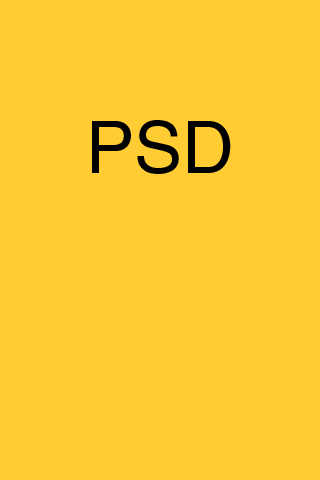
<style>
.page{position:relative;width:320px;height:480px;background:#ffcc33}
.page>*{position:absolute;margin:0}
.t1{font:72px "HelveticaLTStd-Roman";color:#000000}
</style>
<div class="page">
<p class="t1" style="left:92px;top:120px;width:139px;height:54px">PSD</p>
</div>
